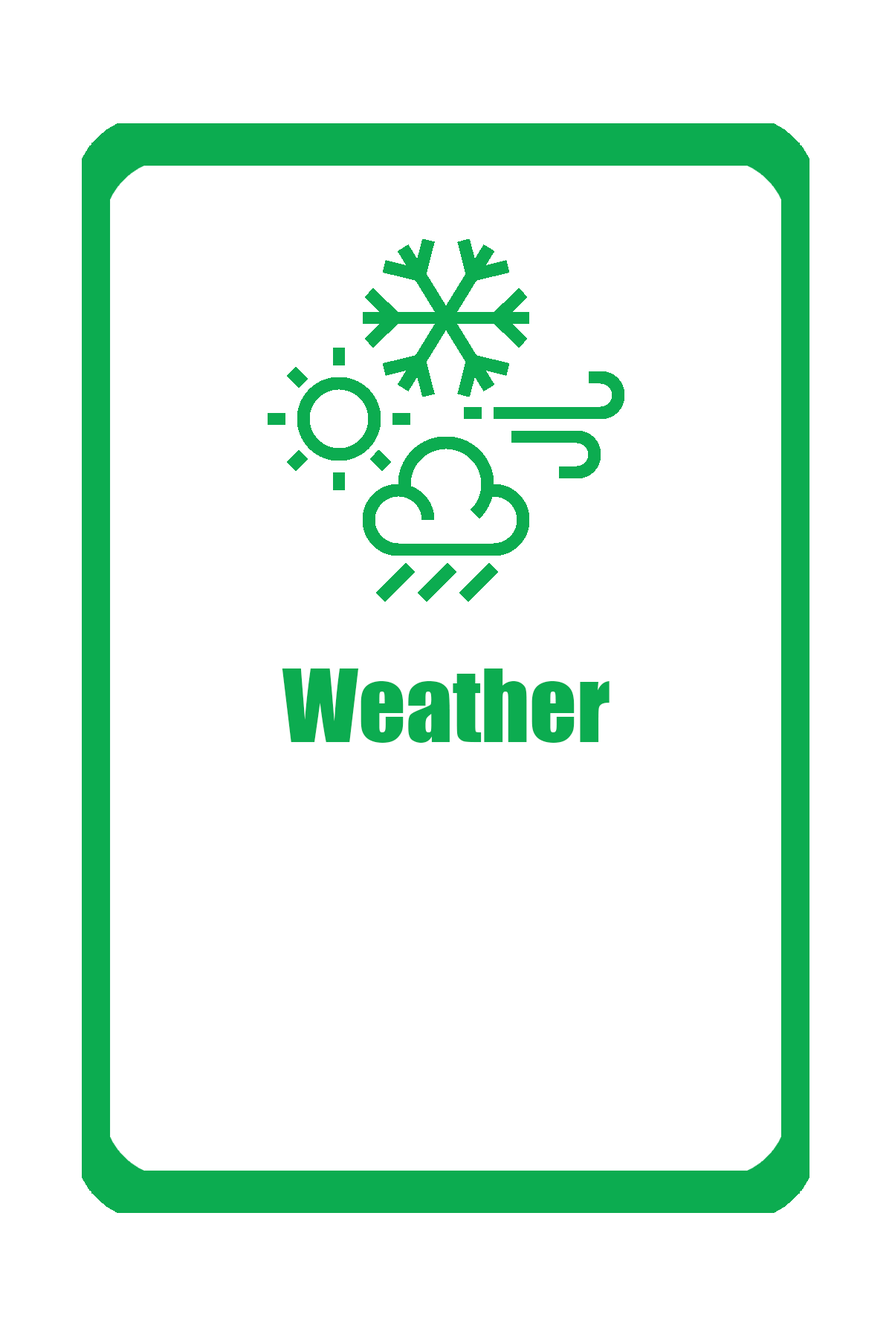
<style>
.page{position:relative;width:892px;height:1337px;background:#ffffff}
.page>*{position:absolute;margin:0}
.t1{font:92.9px "Impact";color:#0cac50}
</style>
<div class="page">
<p class="t1" style="left:282px;top:669px;width:327px;height:74px">Weather</p>
</div>
